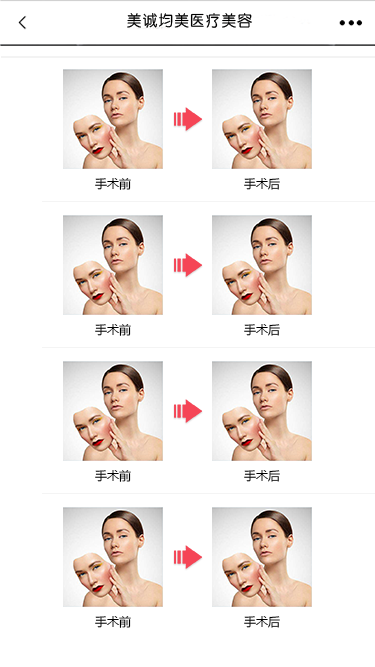
<style>
.page{position:relative;width:375px;height:667px;background:#ffffff}
.page>*{position:absolute;margin:0}
.t1{font:12px "MicrosoftYaHei";letter-spacing:0.005em;color:#000000}
</style>
<div class="page">
<p class="t1" style="left:95px;top:178px;width:36px;height:12px">手术前</p>
<p class="t1" style="left:244px;top:178px;width:36px;height:12px">手术后</p>
<p class="t1" style="left:95px;top:324px;width:36px;height:12px">手术前</p>
<p class="t1" style="left:244px;top:324px;width:36px;height:12px">手术后</p>
<p class="t1" style="left:95px;top:470px;width:36px;height:12px">手术前</p>
<p class="t1" style="left:244px;top:470px;width:36px;height:12px">手术后</p>
<p class="t1" style="left:95px;top:616px;width:36px;height:12px">手术前</p>
<p class="t1" style="left:244px;top:616px;width:36px;height:12px">手术后</p>
</div>
